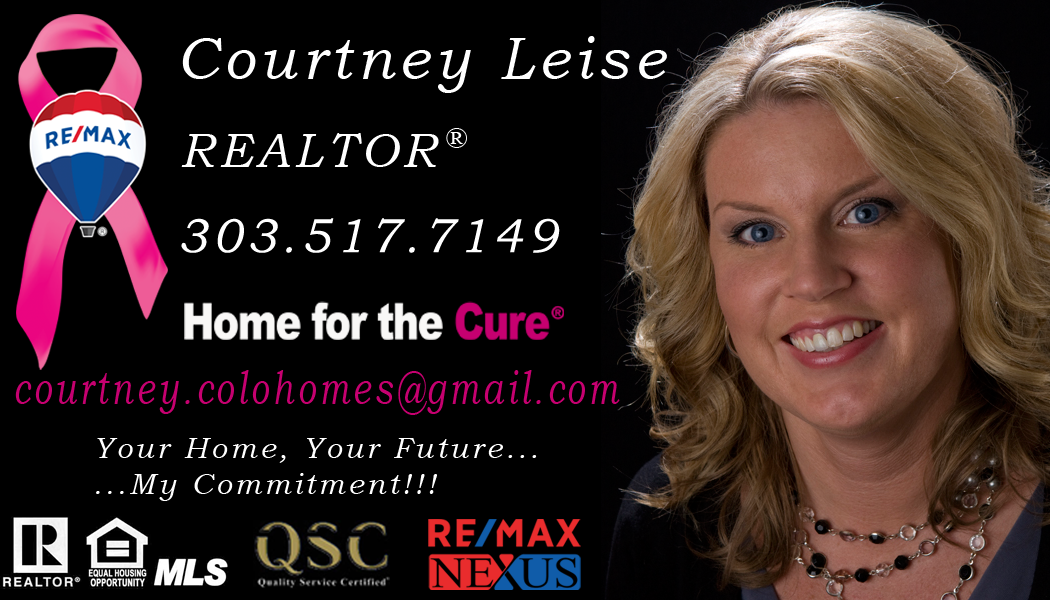
<style>
.page{position:relative;width:1050px;height:600px;background:#000000}
.page>*{position:absolute;margin:0}
.t1{font:60px "BookmanOldStyle-Italic";letter-spacing:0.1em;color:#ffffff;scale:0.96 1}
.t2{font:48px "BookmanOldStyle-Italic";letter-spacing:0.1em;color:#ffffff}
.t3{font:30px "BookmanOldStyle-Italic";letter-spacing:0.1em;color:#ffffff}
.t4{font:48px "BookmanOldStyle-Italic";letter-spacing:0.1em;color:#c60070;scale:0.71 1}
</style>
<div class="page">
<p class="t1" style="left:182px;top:36px;width:485px;height:57px">Courtney Leise</p>
<p class="t2" style="left:181px;top:133px;width:258px;height:34px">REALTOR</p>
<p class="t3" style="left:446px;top:128px;width:21px;height:20px">®</p>
<p class="t2" style="left:181px;top:218px;width:379px;height:35px">303.517.7149</p>
<p class="t4" style="left:15px;top:370px;width:605px;height:45px">courtney.colohomes@gmail.com</p>
<p class="t3" style="left:96px;top:438px;width:441px;height:63px">Your Home, Your Future...<br>...My Commitment!!!</p>
</div>
